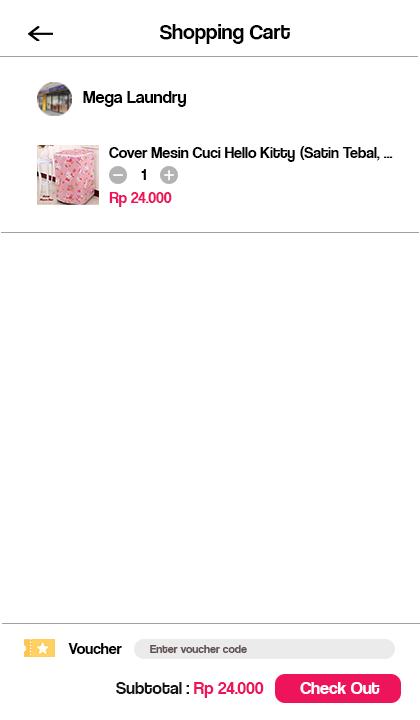
<style>
.page{position:relative;width:420px;height:720px;background:#ffffff}
.page>*{position:absolute;margin:0}
.t1{font:22px "CoolveticaRg-Regular";color:#000000}
.t2{font:18px "CoolveticaRg-Regular";color:#000000}
.t3{font:16px "CoolveticaRg-Regular";color:#000000}
.t4{font:16px "CoolveticaRg-Regular";color:#ed145b}
.t5{font:12px "CoolveticaRg-Regular";color:#605252}
.t6{font:18px "CoolveticaRg-Regular";color:#151313}
.t7{font:18px "CoolveticaRg-Regular";color:#ed145b}
.t8{font:18px "CoolveticaRg-Regular";color:#ffffff}
</style>
<div class="page">
<p class="t1" style="left:159px;top:24px;width:131px;height:20px">Shopping Cart</p>
<p class="t2" style="left:83px;top:91px;width:103px;height:16px">Mega Laundry</p>
<p class="t3" style="left:109px;top:146px;width:284px;height:16px">Cover Mesin Cuci Hello Kitty (Satin Tebal, ...</p>
<p class="t3" style="left:141px;top:169px;width:5px;height:11px">1</p>
<p class="t4" style="left:109px;top:192px;width:63px;height:15px">Rp 24.000</p>
<p class="t3" style="left:68px;top:643px;width:54px;height:11px">Voucher</p>
<p class="t5" style="left:150px;top:645px;width:97px;height:8px">Enter voucher code</p>
<p class="t6" style="left:116px;top:682px;width:148px;height:16px">Subtotal : <span class="t7">Rp 24.000</span></p>
<p class="t8" style="left:300px;top:682px;width:80px;height:12px">Check Out</p>
</div>
